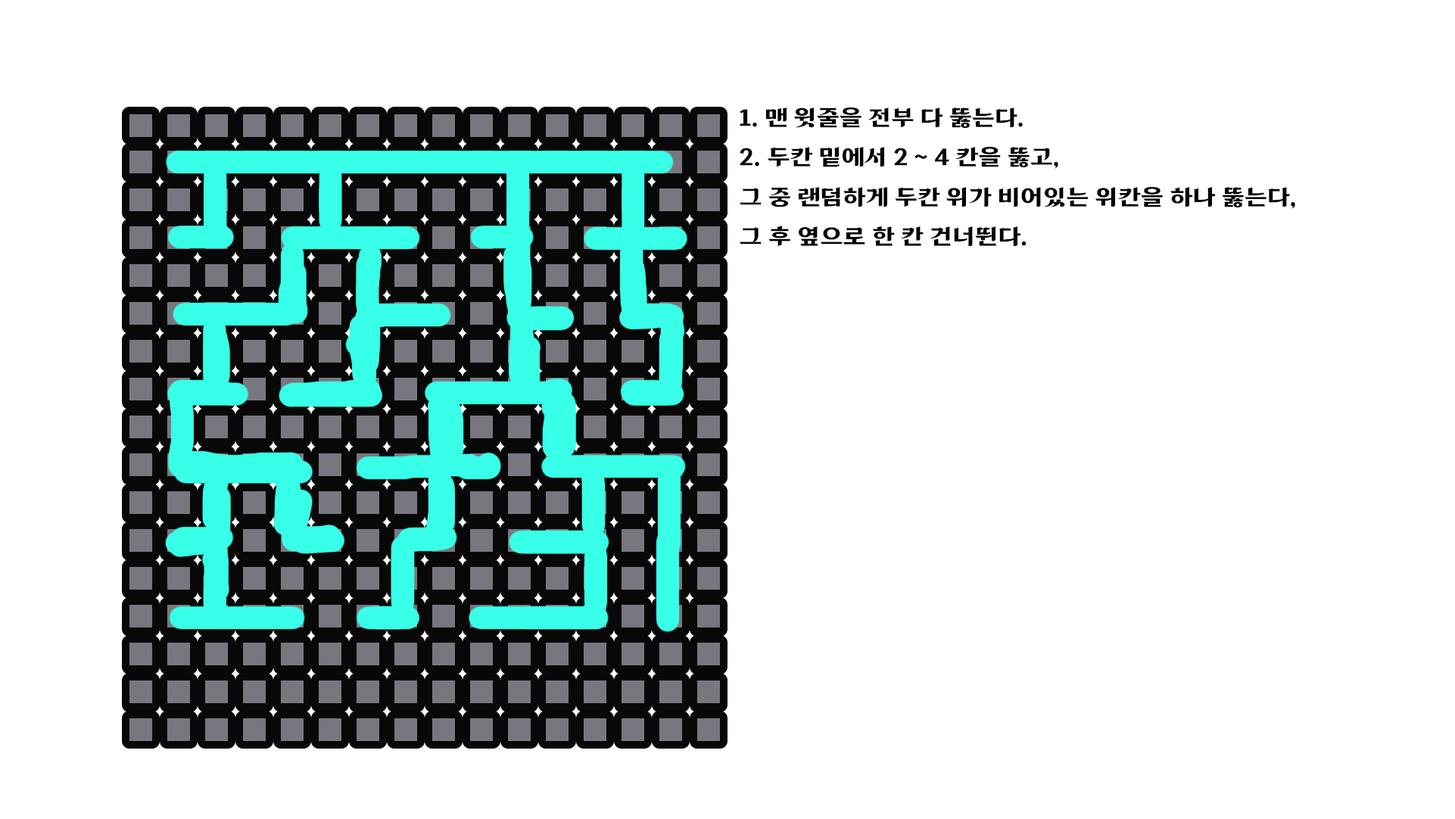
<style>
.page{position:relative;width:1455px;height:819px;background:#ffffff}
.page>*{position:absolute;margin:0}
.t1{font:22.7px "62570";color:#000000}
</style>
<div class="page">
<p class="t1" style="left:739px;top:108px;width:557px;height:139px">1. 맨 윗줄을 전부 다 뚫는다.<br>2. 두칸 밑에서 2 ~ 4 칸을 뚫고,<br>그 중 랜덤하게 두칸 위가 비어있는 위칸을 하나 뚫는다, <br>그 후 옆으로 한 칸 건너뛴다.</p>
</div>
